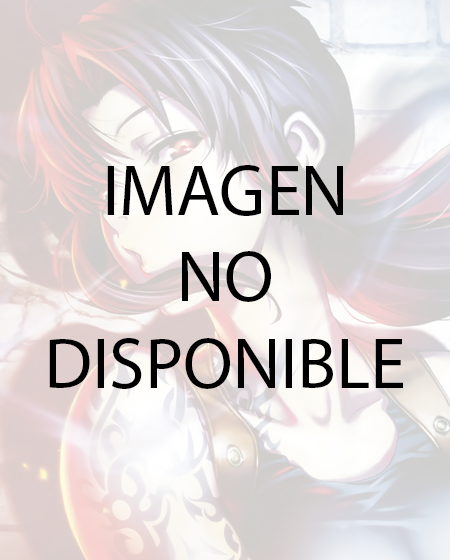
<style>
.page{position:relative;width:450px;height:560px}
.page>*{position:absolute;margin:0}
.t1{font:72px "MyriadPro-Regular";color:#000000}
</style>
<div class="page">
<p class="t1" style="left:49px;top:165px;width:354px;height:224px;text-align:center">IMAGEN<br>NO<br>DISPONIBLE</p>
</div>
